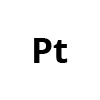
<style>
.page{position:relative;width:100px;height:100px;background:#ffffff}
.page>*{position:absolute;margin:0}
.t1{font:35px "OpenSans-Bold";color:#000000}
</style>
<div class="page">
<p class="t1" style="left:34px;top:38px;width:34px;height:25px">Pt</p>
</div>
